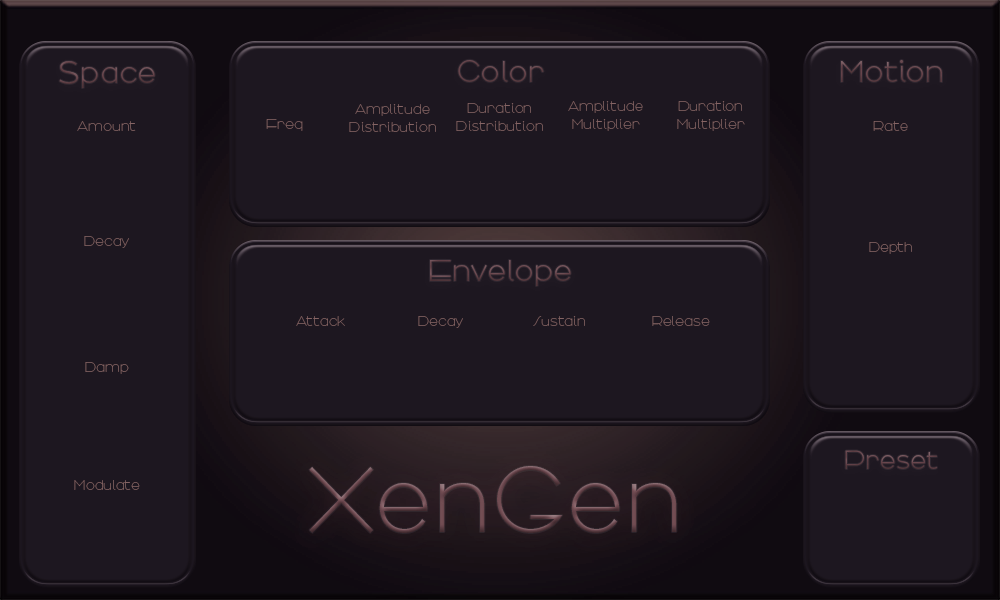
<style>
.page{position:relative;width:1000px;height:600px;background:#1d1720}
.page>*{position:absolute;margin:0}
.t1{font:32.6px "Arbotek-Light";color:#65444b}
.t2{font:44.8px "Arbotek-Light";color:#65444b}
.t3{font:32.6px "Arbotek-Light";color:#644249}
.t4{font:15px "Arbotek-Thin";color:#856464}
.t5{font:32.6px "Arbotek-Light";color:#66454c}
.t6{font:28px "Arbotek-Light";color:#624148}
.t7{font:99.6px "Arbotek-Light"}
</style>
<div class="page">
<p class="t1" style="left:59px;top:61px;width:96px;height:27px"><span class="t2">s</span>pace</p>
<p class="t3" style="left:458px;top:60px;width:86px;height:22px">Color</p>
<p class="t3" style="left:841px;top:60px;width:101px;height:22px">Motion</p>
<p class="t4" style="left:568px;top:101px;width:75px;height:30px;text-align:center">Amplitude<br>Multiplier</p>
<p class="t4" style="left:677px;top:101px;width:68px;height:30px;text-align:center">Duration<br>Multiplier</p>
<p class="t4" style="left:349px;top:104px;width:87px;height:28px;text-align:center">Amplitude<br>Distribution</p>
<p class="t4" style="left:456px;top:103px;width:87px;height:28px;text-align:center">Duration<br>Distribution</p>
<p class="t4" style="left:77px;top:121px;width:59px;height:10px">Amount</p>
<p class="t4" style="left:266px;top:119px;width:37px;height:12px">Freq</p>
<p class="t4" style="left:873px;top:121px;width:35px;height:10px">Rate</p>
<p class="t4" style="left:84px;top:236px;width:45px;height:12px">Decay</p>
<p class="t4" style="left:869px;top:242px;width:43px;height:12px">Depth</p>
<p class="t5" style="left:430px;top:260px;width:141px;height:26px">Envelope</p>
<p class="t4" style="left:296px;top:316px;width:49px;height:10px">Attack</p>
<p class="t4" style="left:418px;top:316px;width:45px;height:12px">Decay</p>
<p class="t4" style="left:533px;top:316px;width:52px;height:10px">Sustain</p>
<p class="t4" style="left:652px;top:316px;width:58px;height:10px">Release</p>
<p class="t4" style="left:85px;top:362px;width:44px;height:12px">Damp</p>
<p class="t6" style="left:845px;top:450px;width:92px;height:19px">Preset</p>
<p class="t7" style="left:309px;top:466px;width:368px;height:67px">XenGen</p>
<p class="t4" style="left:74px;top:480px;width:66px;height:10px">Modulate</p>
</div>
